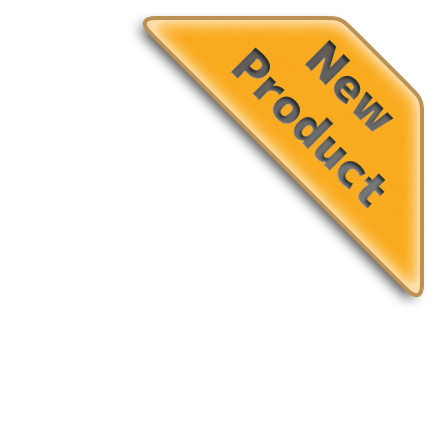
<style>
.page{position:relative;width:440px;height:440px;background:#ffffff}
.page>*{position:absolute;margin:0}
.t1{font:48px "mplus-1p-black";color:#615f5c}
</style>
<div class="page">
<p class="t1" style="left:230px;top:40px;width:164px;height:169px;text-align:center;rotate:45deg">New<br>Product</p>
</div>
